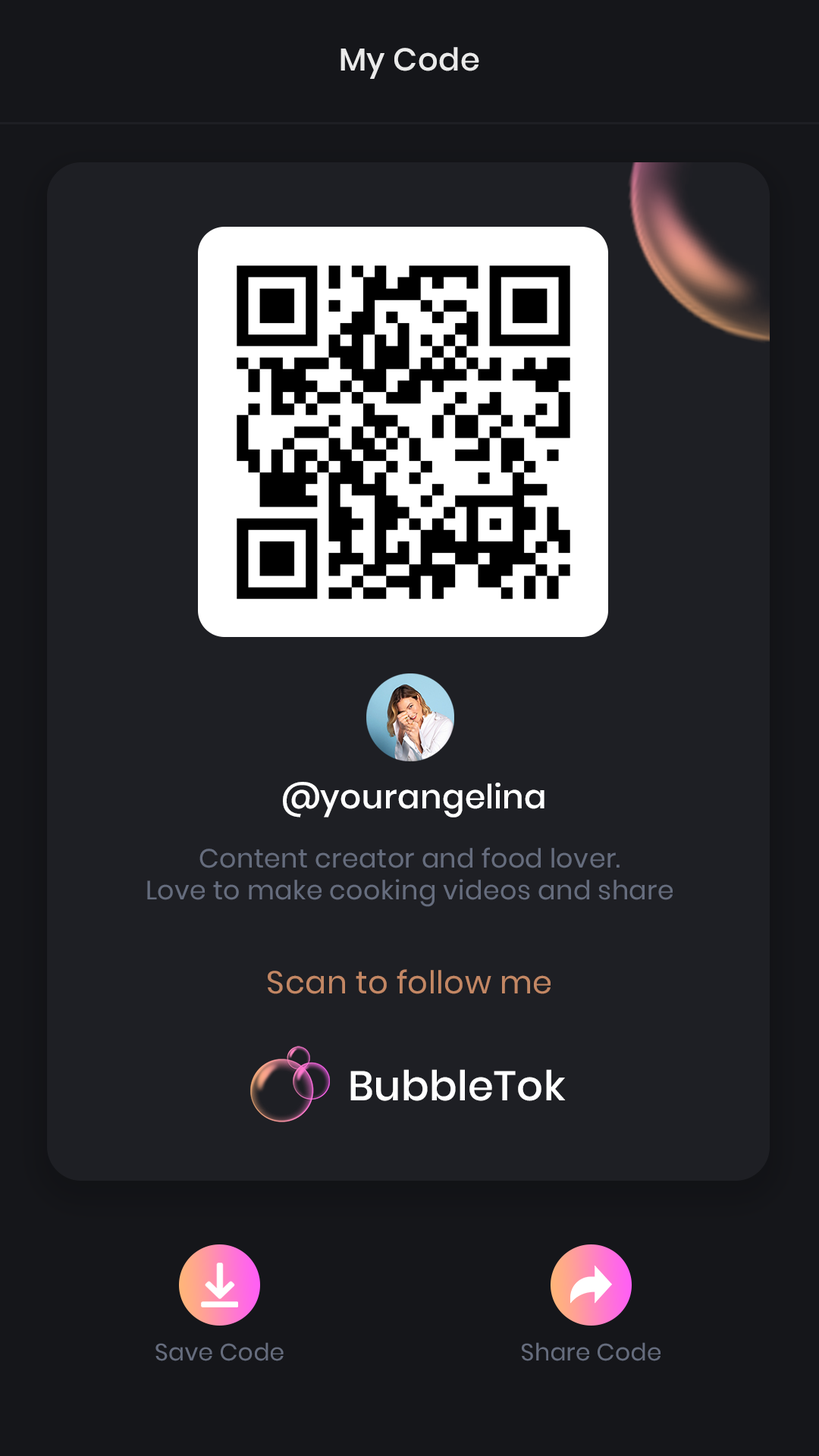
<style>
.page{position:relative;width:819px;height:1456px;background:#1e1f24}
.page>*{position:absolute;margin:0}
.t1{font:31.6px "Poppins-Medium";letter-spacing:0.01em;color:#eaeaea}
.t2{font:33.2px "Poppins-Medium";letter-spacing:0.01em;color:#ffffff}
.t3{font:26.3px/31.6px "Poppins-Regular";letter-spacing:0.01em;color:#666d7e}
.t4{font:31.6px "Poppins-Regular";letter-spacing:0.01em;color:#c38764}
.t5{font:41.4px "Poppins-Medium";letter-spacing:0.01em;color:#ffffff}
.t6{font:23.7px "Poppins-Regular";letter-spacing:0.01em;color:#666d7e}
</style>
<div class="page">
<p class="t1" style="left:340px;top:47px;width:139px;height:32px">My Code</p>
<p class="t2" style="left:283px;top:782px;width:261px;height:35px">@yourangelina</p>
<p class="t3" style="left:147px;top:847px;width:526px;height:60px;text-align:center">Content creator and food lover.<br>Love to make cooking videos and share</p>
<p class="t4" style="left:268px;top:969px;width:283px;height:25px">Scan to follow me</p>
<p class="t5" style="left:350px;top:1069px;width:216px;height:32px">BubbleTok</p>
<p class="t6" style="left:155px;top:1342px;width:129px;height:19px">Save Code</p>
<p class="t6" style="left:522px;top:1342px;width:138px;height:19px">Share Code</p>
</div>
